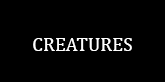
<style>
.page{position:relative;width:165px;height:82px;background:#000000}
.page>*{position:absolute;margin:0}
.t1{font:19.1px "Cambria";color:#ffffff}
</style>
<div class="page">
<p class="t1" style="left:33px;top:38px;width:99px;height:13px">CREATURES</p>
</div>
